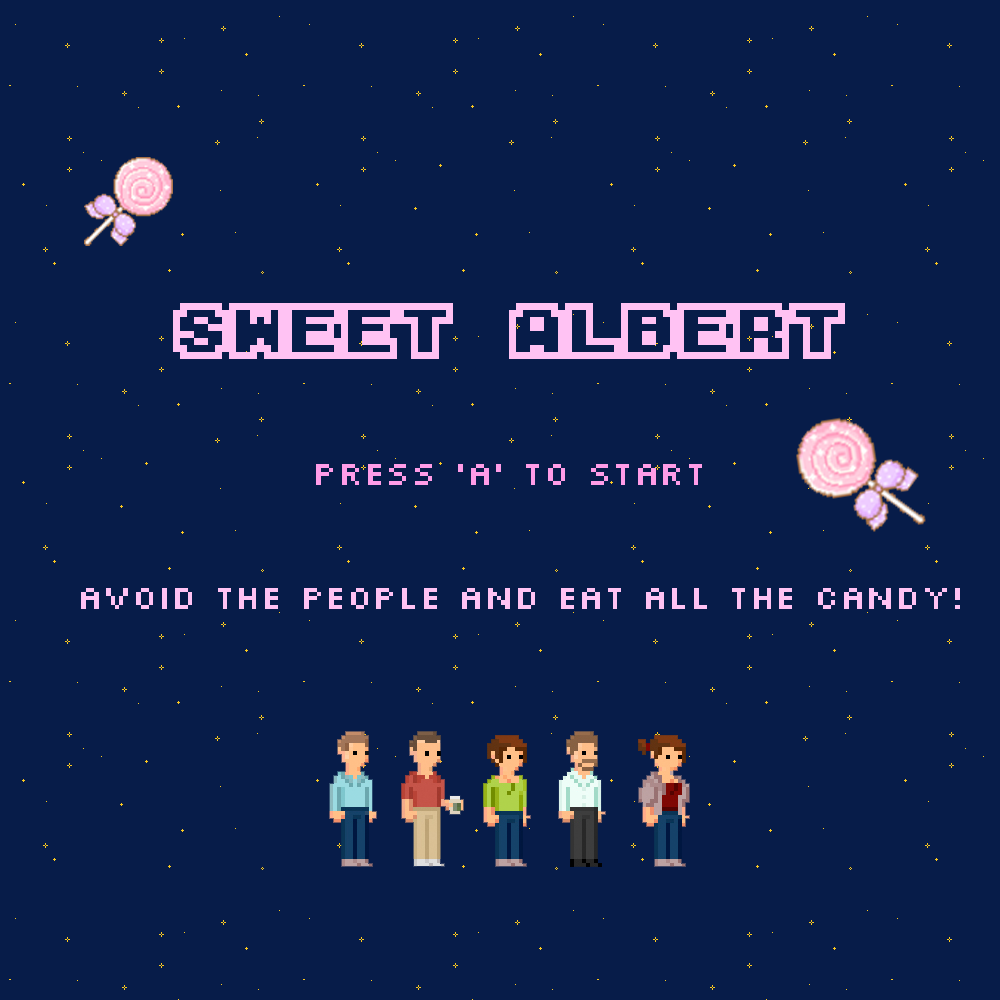
<style>
.page{position:relative;width:1000px;height:1000px;background:#071c49}
.page>*{position:absolute;margin:0}
.t1{font:56px "M04_FATAL-FURY";color:#ffc2f3}
.t2{font:36px "Silkscreen";color:#ff9ce7}
.t3{font:36px "Silkscreen";color:#ffc2f3}
</style>
<div class="page">
<p class="t1" style="left:173px;top:303px;width:672px;height:56px">sweet albert</p>
<p class="t2" style="left:316px;top:464px;width:386px;height:21px">press 'a' to start</p>
<p class="t3" style="left:81px;top:588px;width:879px;height:21px">avoid the people and eat all the candy!</p>
</div>
